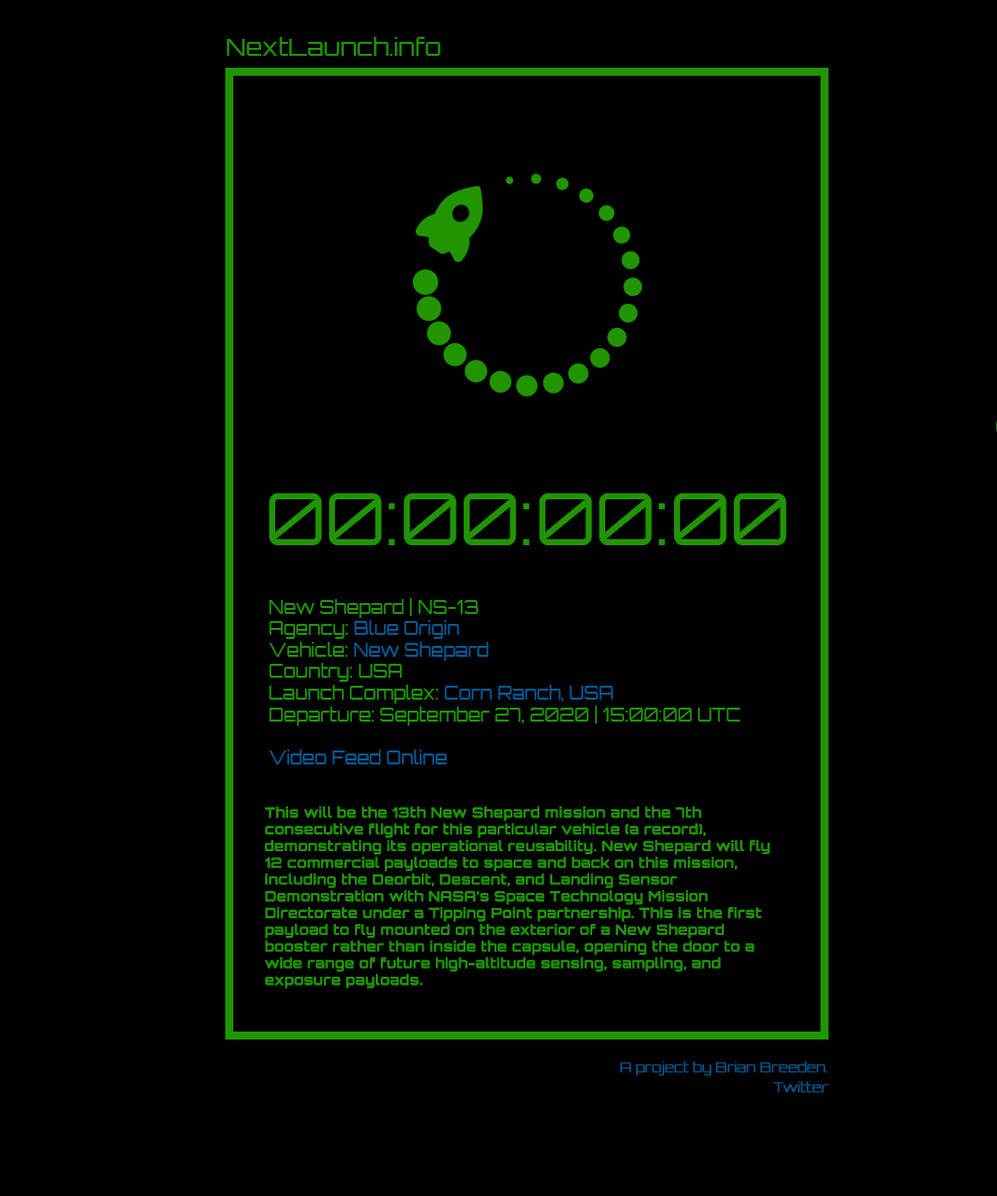
<style>
.page{position:relative;width:997px;height:1196px;background:#000000}
.page>*{position:absolute;margin:0}
.t1{font:23.9px "Orbitron-Regular";color:#209500}
.t2{font:71.8px "Orbitron-Regular";color:#209500}
.t3{font:17.9px "Orbitron-Regular";color:#209500}
.t4{font:17.9px "Orbitron-Regular";color:#005b95}
.t5{font:14px "Orbitron-Bold";letter-spacing:0.025em;color:#209500}
.t6{font:14px "Orbitron-Regular";color:#005b95}
</style>
<div class="page">
<p class="t1" style="left:226px;top:37px;width:215px;height:19px">NextLaunch.info</p>
<p class="t2" style="left:269px;top:493px;width:518px;height:52px">00:00:00:00</p>
<p class="t3" style="left:269px;top:598px;width:472px;height:167px">New Shepard | NS-13<br>Agency: <span class="t4">Blue Origin<br></span>Vehicle: <span class="t4">New Shepard<br></span>Country: USA<br>Launch Complex: <span class="t4">Corn Ranch, USA<br></span>Departure: September 27, 2020 | 15:00:00 UTC<br><br><span class="t4">Video Feed Online</span></p>
<p class="t5" style="left:264px;top:806px;width:506px;height:183px">This will be the 13th New Shepard mission and the 7th consecutive flight for this particular vehicle (a record), demonstrating its operational reusability. New Shepard will fly 12 commercial payloads to space and back on this mission, including the Deorbit, Descent, and Landing Sensor Demonstration with NASA’s Space Technology Mission Directorate under a Tipping Point partnership. This is the first payload to fly mounted on the exterior of a New Shepard booster rather than inside the capsule, opening the door to a wide range of future high-altitude sensing, sampling, and exposure payloads.</p>
<p class="t6" style="left:620px;top:1062px;width:208px;height:14px">A project by Brian Breeden.</p>
<p class="t6" style="left:773px;top:1082px;width:56px;height:11px">Twitter</p>
</div>
